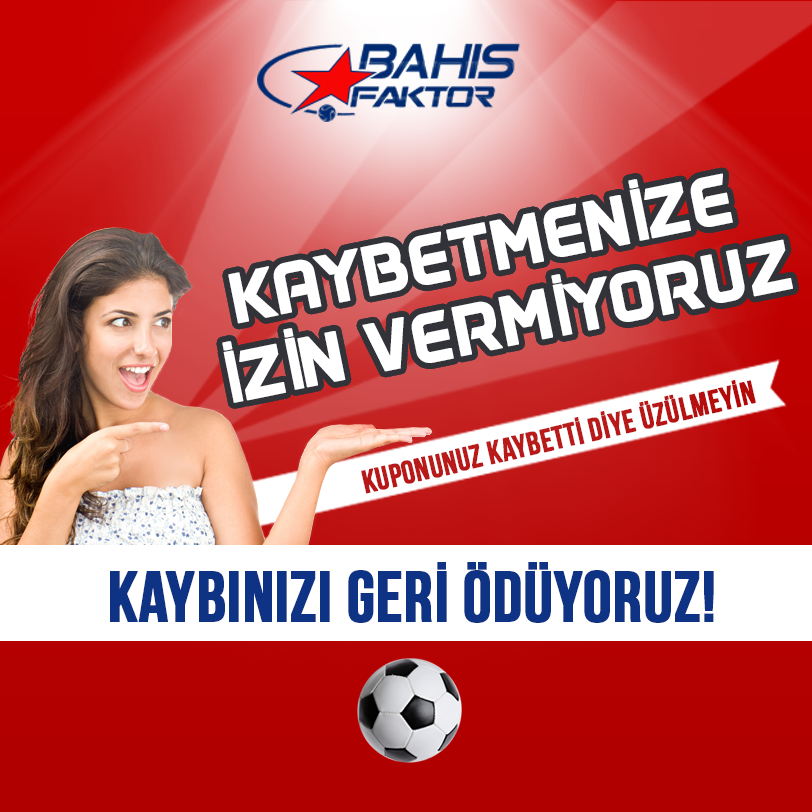
<style>
.page{position:relative;width:812px;height:812px}
.page>*{position:absolute;margin:0}
.t1{font:72px/77px "DAGGERSQUARE";color:#ffffff;text-transform:uppercase;font-weight:bold}
.t2{font:72px/77px "BebasNeue";color:#ffffff;text-transform:uppercase;font-weight:bold}
.t3{font:71px "BebasNeue";color:#0e3284;text-transform:uppercase;font-weight:bold}
</style>
<div class="page">
<p class="t1" style="left:222px;top:173px;width:571px;height:230px;text-align:center;rotate:-12deg">kaybetmen<span class="t2">İ</span>ZE <br><span class="t2">İ</span>Z<span class="t2">İ</span>N VERM<span class="t2">İ</span>YORUZ</p>
<p class="t1" style="left:222px;top:173px;width:571px;height:230px;text-align:center;rotate:-12deg">kaybetmen<span class="t2">İ</span>ZE <br><span class="t2">İ</span>Z<span class="t2">İ</span>N VERM<span class="t2">İ</span>YORUZ</p>
<p class="t3" style="left:110px;top:562px;width:604px;height:61px">kaybınızı gerİ ÖDÜYORUZ!</p>
</div>
